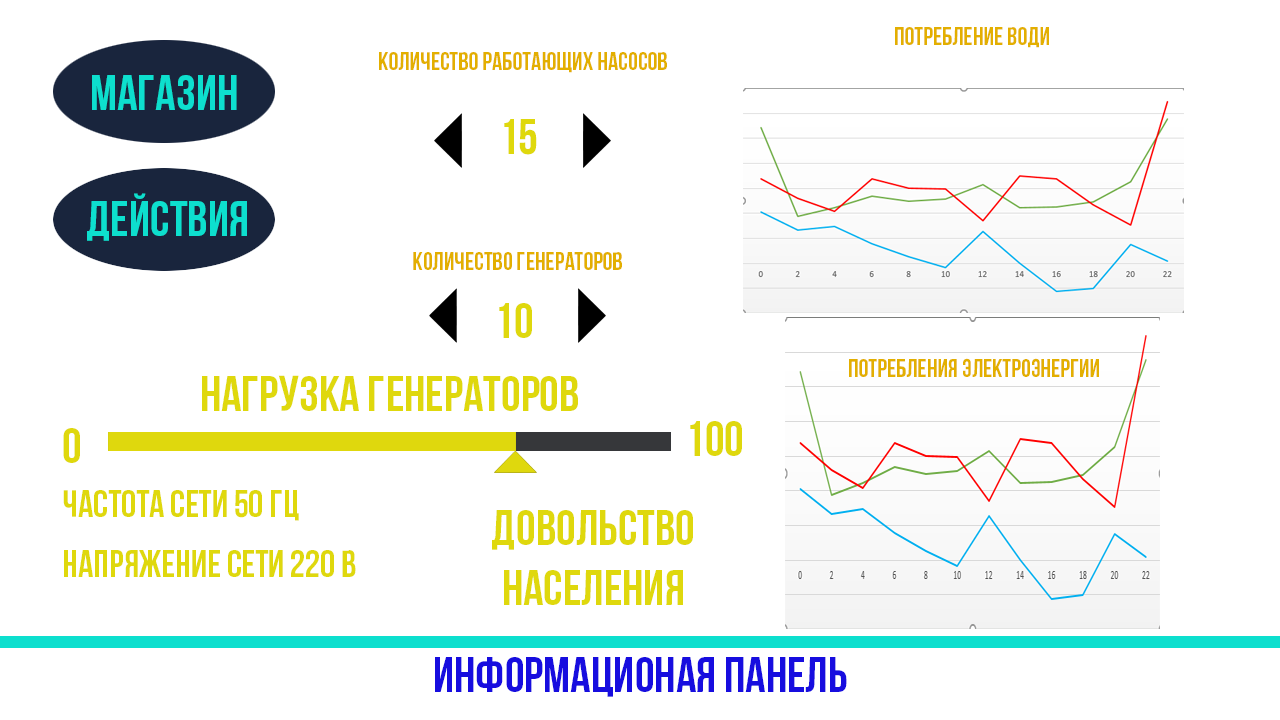
<style>
.page{position:relative;width:1280px;height:720px;background:#ffffff}
.page>*{position:absolute;margin:0}
.t1{font:25px "BebasNeueBold";color:#e3af00}
.t2{font:50px "BebasNeueBold";color:#0ddfce}
.t3{font:50px "BebasNeueBold";color:#dfd80d}
.t4{font:37.5px "BebasNeueBold";color:#dfd80d}
.t5{font:50px "BebasNeueBold";color:#170ddf}
</style>
<div class="page">
<p class="t1" style="left:895px;top:27px;width:154px;height:21px">Потребление Води</p>
<p class="t1" style="left:379px;top:52px;width:288px;height:21px">Количество работающих насосов</p>
<p class="t2" style="left:92px;top:75px;width:145px;height:35px">Магазин</p>
<p class="t3" style="left:504px;top:119px;width:33px;height:36px">15</p>
<p class="t2" style="left:87px;top:193px;width:160px;height:48px">Действия</p>
<p class="t1" style="left:413px;top:252px;width:209px;height:18px">Количество генераторов</p>
<p class="t3" style="left:499px;top:303px;width:33px;height:35px">10</p>
<p class="t1" style="left:849px;top:358px;width:250px;height:19px">Потребления электроэнергии</p>
<p class="t3" style="left:202px;top:375px;width:376px;height:36px">нагрузка генераторов</p>
<p class="t3" style="left:690px;top:421px;width:52px;height:35px">100</p>
<p class="t3" style="left:63px;top:428px;width:17px;height:35px">0</p>
<p class="t4" style="left:63px;top:490px;width:236px;height:31px">Частота сети 50 гц</p>
<p class="t3" style="left:492px;top:510px;width:201px;height:95px;text-align:center">Довольство населения</p>
<p class="t4" style="left:64px;top:550px;width:292px;height:27px">Напряжение сети 220 В</p>
<p class="t5" style="left:435px;top:657px;width:412px;height:40px">Информационая панель</p>
</div>
